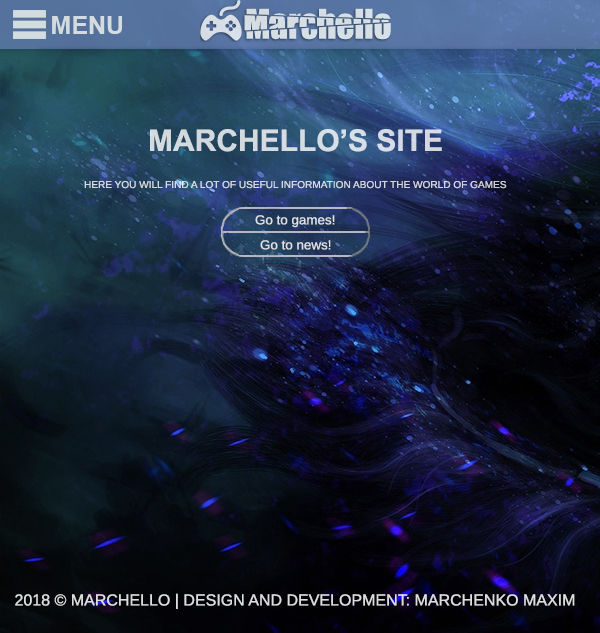
<style>
.page{position:relative;width:600px;height:633px}
.page>*{position:absolute;margin:0}
.t1{font:25.1px "Arial-BoldMT";color:#d3dbde}
.t2{font:30px "Arial-BoldMT";color:#d4dbe1}
.t3{font:10px "WineArial";color:#d3d8e0}
.t4{font:13px "WineArial";color:#dfe1e4}
.t5{font:13px "WineArial";color:#dfe1e5}
.t6{font:16px "WineArial";color:#ddddde}
</style>
<div class="page">
<p class="t1" style="left:52px;top:16px;width:70px;height:18px">MENU</p>
<p class="t2" style="left:150px;top:129px;width:292px;height:23px">MARCHELLO’S SITE</p>
<p class="t3" style="left:84px;top:181px;width:423px;height:8px">HERE YOU WILL FIND A LOT OF USEFUL INFORMATION ABOUT THE WORLD OF GAMES</p>
<p class="t4" style="left:255px;top:215px;width:80px;height:13px">Go to games!</p>
<p class="t5" style="left:260px;top:240px;width:71px;height:10px">Go to news!</p>
<p class="t6" style="left:15px;top:593px;width:560px;height:16px">2018 © MARCHELLO | DESIGN AND DEVELOPMENT: MARCHENKO MAXIM</p>
</div>
